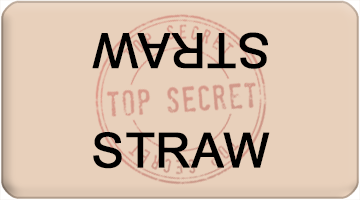
<style>
.page{position:relative;width:360px;height:200px;background:#e8d0bb}
.page>*{position:absolute;margin:0}
.t1{font:48px "ArialMT";color:#000000;font-weight:bold}
</style>
<div class="page">
<p class="t1" style="left:92px;top:32px;width:176px;height:37px;rotate:180deg">STRAW</p>
<p class="t1" style="left:93px;top:132px;width:177px;height:37px">STRAW</p>
</div>
